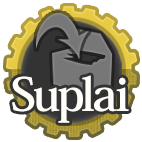
<style>
.page{position:relative;width:142px;height:142px;background:#ffffff}
.page>*{position:absolute;margin:0}
.t1{font:48px "HeiseiMinStd-W7";letter-spacing:-0.04em;color:#fffef9}
</style>
<div class="page">
<p class="t1" style="left:12px;top:75px;width:117px;height:48px">Suplai</p>
</div>
